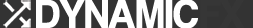
<style>
.page{position:relative;width:253px;height:28px;background:#333333}
.page>*{position:absolute;margin:0}
.t1{font:38.2px "Helvetica-Bold";letter-spacing:-0.075em;color:#ffffff;font-weight:bold}
.t2{font:38.2px "Helvetica-Bold";letter-spacing:-0.075em;color:#363636;font-weight:bold}
</style>
<div class="page">
<p class="t1" style="left:36px;top:0px;width:209px;height:29px">DYNAMIC<span class="t2">FX</span></p>
</div>
